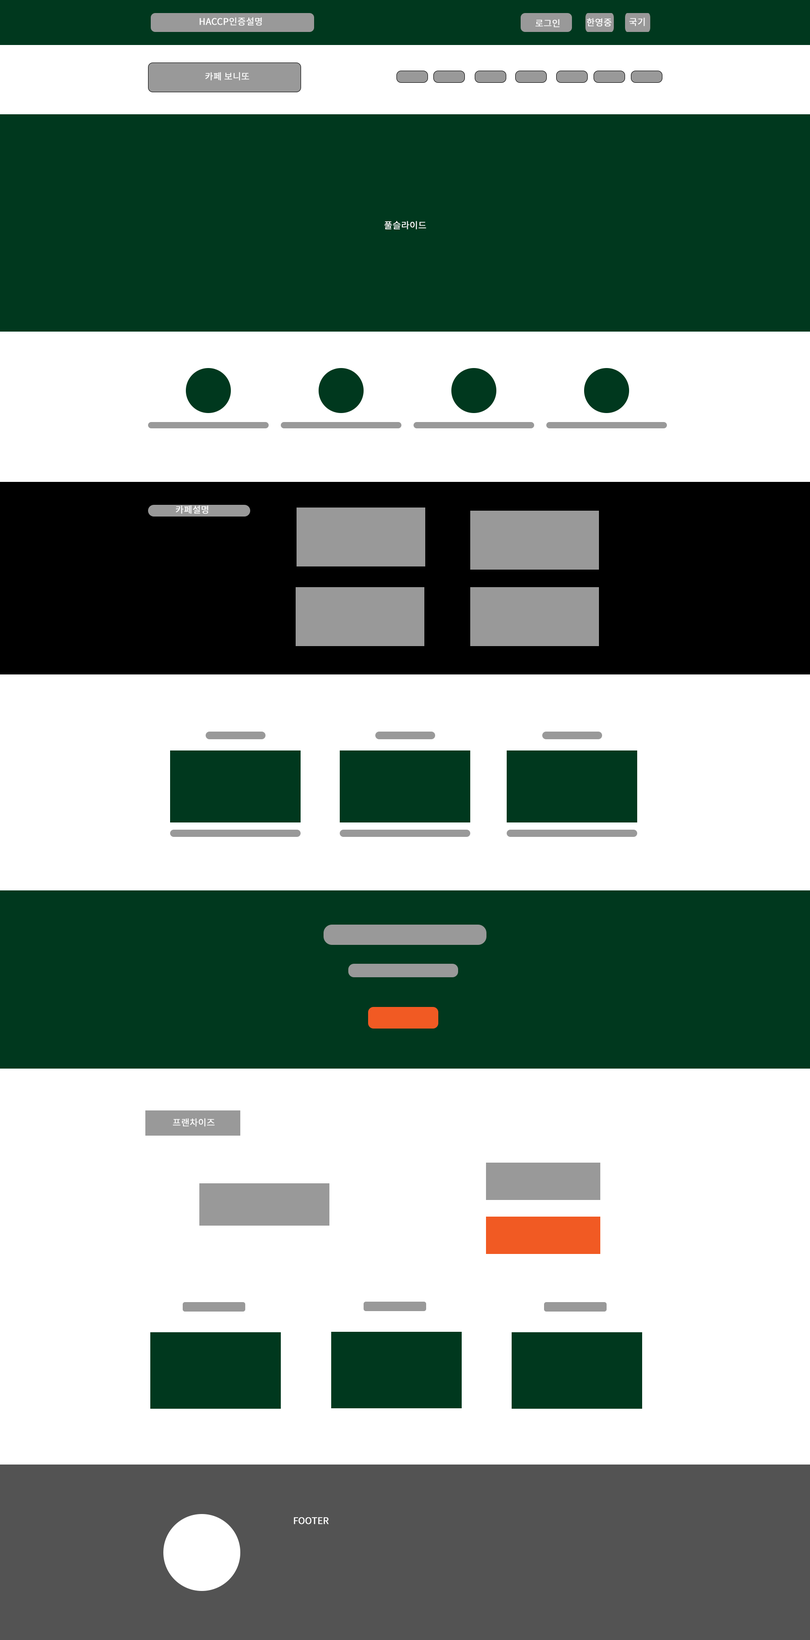
<style>
.page{position:relative;width:810px;height:1640px;background:#ffffff}
.page>*{position:absolute;margin:0}
.t1{font:9px "NotoSansKR-Regular";color:#ffffff;font-weight:bold}
</style>
<div class="page">
<p class="t1" style="left:199px;top:17px;width:63px;height:9px">HACCP인증설명</p>
<p class="t1" style="left:629px;top:18px;width:16px;height:8px">국기</p>
<p class="t1" style="left:536px;top:19px;width:24px;height:8px">로그인</p>
<p class="t1" style="left:587px;top:18px;width:25px;height:9px">한영중</p>
<p class="t1" style="left:205px;top:72px;width:44px;height:9px">카페 보니또</p>
<p class="t1" style="left:384px;top:221px;width:42px;height:9px">풀슬라이드</p>
<p class="t1" style="left:176px;top:505px;width:32px;height:9px">카페설명</p>
<p class="t1" style="left:173px;top:1118px;width:42px;height:9px">프랜차이즈</p>
<p class="t1" style="left:294px;top:1517px;width:35px;height:8px">FOOTER</p>
</div>
